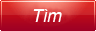
<style>
.page{position:relative;width:96px;height:31px}
.page>*{position:absolute;margin:0}
.t1{font:18px "VNI-Helve-Italic";color:#ffffff}
</style>
<div class="page">
<p class="t1" style="left:33px;top:9px;width:29px;height:13px">Tìm</p>
</div>
